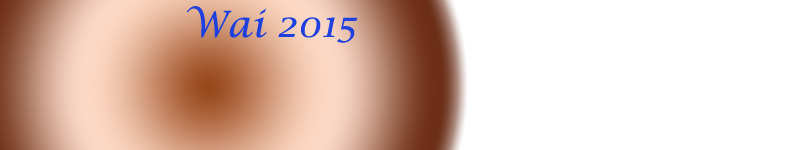
<style>
.page{position:relative;width:800px;height:150px;background:#ffffff}
.page>*{position:absolute;margin:0}
.t1{font:36px "LucidaCalligraphy-Italic";color:#1d40de}
</style>
<div class="page">
<p class="t1" style="left:186px;top:6px;width:172px;height:37px">Wai 2015</p>
</div>
